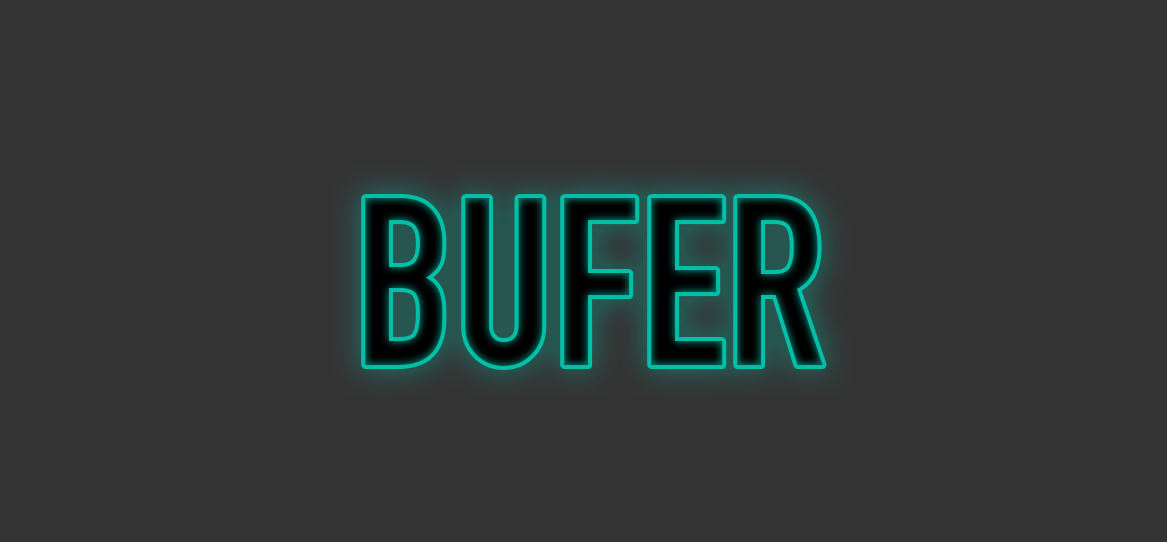
<style>
.page{position:relative;width:1167px;height:542px;background:#333333}
.page>*{position:absolute;margin:0}
.t1{font:233.7px "DINEngschrift";text-transform:uppercase}
</style>
<div class="page">
<p class="t1" style="left:365px;top:198px;width:458px;height:168px">bufer</p>
</div>
